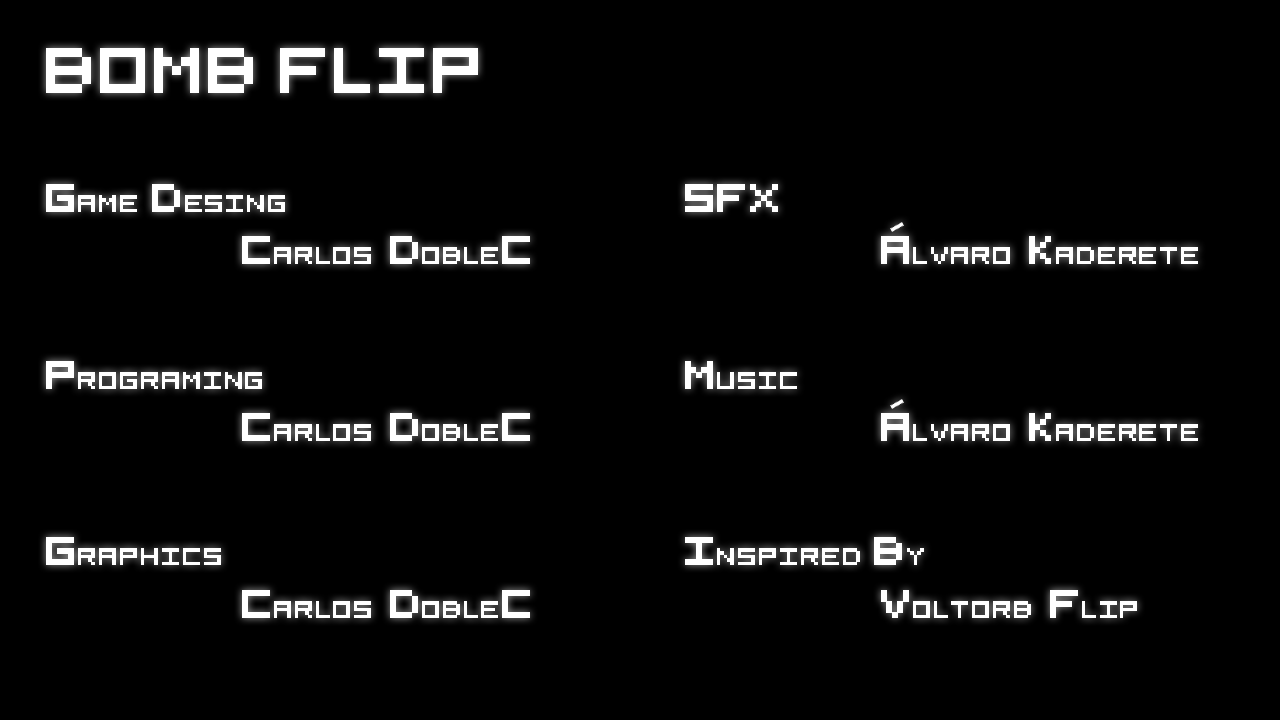
<style>
.page{position:relative;width:1280px;height:720px;background:#000000}
.page>*{position:absolute;margin:0}
.t1{font:72px "5x5-Pixel";color:#ffffff}
.t2{font:27.2px "5x5-Pixel";color:#ffffff}
.t3{font:43.5px "5x5-Pixel";color:#ffffff}
</style>
<div class="page">
<p class="t1" style="left:46px;top:48px;width:432px;height:45px">Bomb  fLIP</p>
<p class="t2" style="left:46px;top:184px;width:484px;height:80px"><span class="t3">g</span>AME<span class="t3">  d</span>ESING<br><span class="t3">      C</span>arlos  <span class="t3">D</span>oble<span class="t3">C</span></p>
<p class="t3" style="left:685px;top:184px;width:513px;height:80px">sfx<br>      A<span class="t2">lvaro  </span>k<span class="t2">aderete</span></p>
<p class="t2" style="left:46px;top:361px;width:484px;height:80px"><span class="t3">p</span>ROGRAMING<br><span class="t3">      C</span>arlos  <span class="t3">D</span>oble<span class="t3">C</span></p>
<p class="t2" style="left:685px;top:361px;width:513px;height:80px"><span class="t3">M</span>usic<br><span class="t3">      A</span>lvaro  <span class="t3">k</span>aderete</p>
<p class="t2" style="left:46px;top:537px;width:484px;height:81px"><span class="t3">g</span>RAPHICS<br><span class="t3">      C</span>arlos  <span class="t3">D</span>oble<span class="t3">C</span></p>
<p class="t2" style="left:685px;top:537px;width:452px;height:81px"><span class="t3">i</span>NSPIREd<span class="t3">  B</span>y<br><span class="t3">      V</span>oltorb  <span class="t3">f</span>lip</p>
</div>
